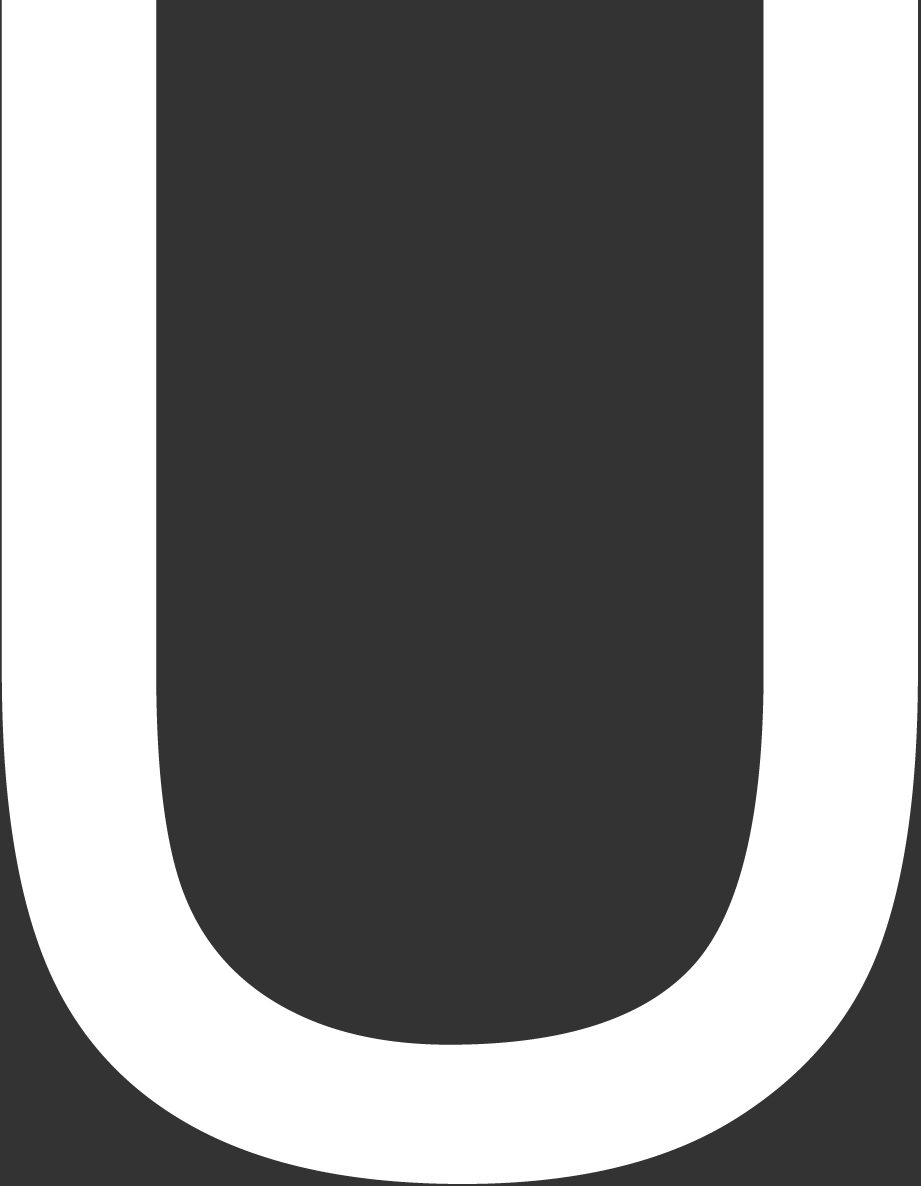
<style>
.page{position:relative;width:921px;height:1186px;background:#333333}
.page>*{position:absolute;margin:0}
.t1{font:1626.7px "ArialMT";color:#ffffff}
</style>
<div class="page">
<p class="t1" style="left:1px;top:0px;width:917px;height:1184px">U</p>
</div>
